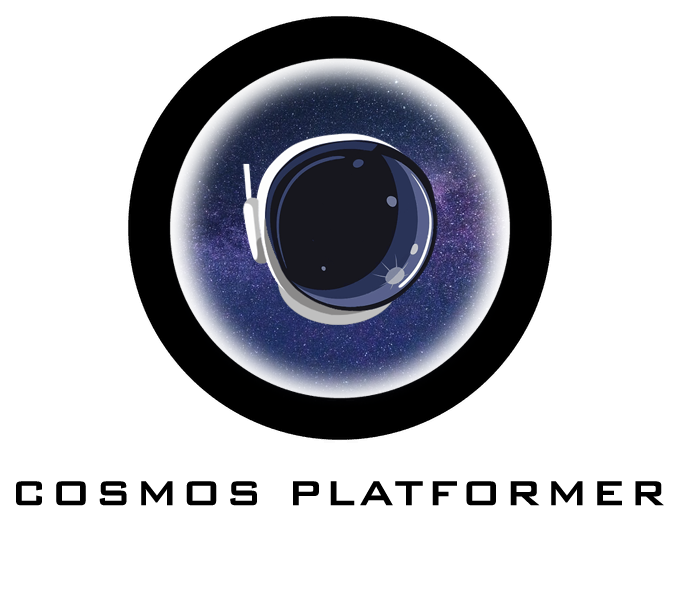
<style>
.page{position:relative;width:680px;height:613px;background:#ffffff}
.page>*{position:absolute;margin:0}
.t1{font:46px "BankGothicBT-Medium";letter-spacing:0.075em;color:#000000;text-transform:uppercase}
</style>
<div class="page">
<p class="t1" style="left:16px;top:481px;width:648px;height:25px">Cosmos platformer</p>
</div>
